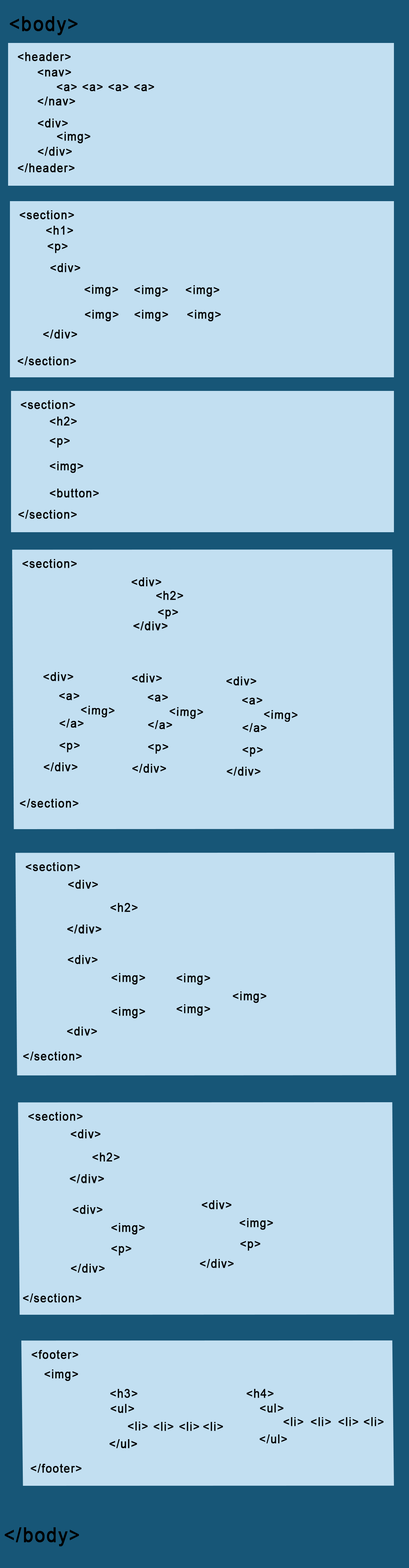
<style>
.page{position:relative;width:409px;height:1568px;background:#c2dff1}
.page>*{position:absolute;margin:0}
.t1{font:20.2px "ArialMT";letter-spacing:0.06em;color:#000000;font-weight:bold;scale:0.91 1}
.t2{font:12.1px "ArialMT";letter-spacing:0.06em;color:#000000;font-weight:bold;scale:0.9 1}
.t3{font:12.1px "ArialMT";letter-spacing:0.06em;color:#000000;font-weight:bold;scale:0.91 1}
.t4{font:12px "ArialMT";letter-spacing:0.06em;color:#000000;font-weight:bold;scale:0.91 1}
.t5{font:12.2px "ArialMT";letter-spacing:0.06em;color:#000000;font-weight:bold;scale:0.9 1}
</style>
<div class="page">
<p class="t1" style="left:10px;top:16px;width:67px;height:19px">&lt;body&gt;</p>
<p class="t2" style="left:18px;top:52px;width:53px;height:9px">&lt;header&gt;</p>
<p class="t2" style="left:37px;top:69px;width:34px;height:8px">&lt;nav&gt;</p>
<p class="t3" style="left:57px;top:84px;width:97px;height:7px">&lt;a&gt; &lt;a&gt; &lt;a&gt; &lt;a&gt;</p>
<p class="t2" style="left:37px;top:97px;width:38px;height:9px">&lt;/nav&gt;</p>
<p class="t4" style="left:38px;top:119px;width:30px;height:9px">&lt;div&gt;</p>
<p class="t4" style="left:57px;top:132px;width:33px;height:12px">&lt;img&gt;</p>
<p class="t4" style="left:38px;top:147px;width:34px;height:9px">&lt;/div&gt;</p>
<p class="t2" style="left:18px;top:163px;width:57px;height:10px">&lt;/header&gt;</p>
<p class="t2" style="left:19px;top:210px;width:55px;height:9px">&lt;section&gt;</p>
<p class="t2" style="left:46px;top:226px;width:27px;height:9px">&lt;h1&gt;</p>
<p class="t2" style="left:47px;top:243px;width:21px;height:10px">&lt;p&gt;</p>
<p class="t4" style="left:50px;top:263px;width:30px;height:9px">&lt;div&gt;</p>
<p class="t5" style="left:84px;top:285px;width:34px;height:12px">&lt;img&gt;</p>
<p class="t5" style="left:134px;top:285px;width:34px;height:12px">&lt;img&gt;</p>
<p class="t5" style="left:185px;top:285px;width:34px;height:12px">&lt;img&gt;</p>
<p class="t5" style="left:85px;top:310px;width:34px;height:12px">&lt;img&gt;</p>
<p class="t5" style="left:134px;top:310px;width:34px;height:12px">&lt;img&gt;</p>
<p class="t5" style="left:187px;top:310px;width:34px;height:12px">&lt;img&gt;</p>
<p class="t4" style="left:43px;top:330px;width:34px;height:9px">&lt;/div&gt;</p>
<p class="t3" style="left:18px;top:356px;width:58px;height:10px">&lt;/section&gt;</p>
<p class="t2" style="left:21px;top:400px;width:54px;height:9px">&lt;section&gt;</p>
<p class="t2" style="left:50px;top:417px;width:27px;height:9px">&lt;h2&gt;</p>
<p class="t2" style="left:50px;top:438px;width:20px;height:10px">&lt;p&gt;</p>
<p class="t2" style="left:50px;top:461px;width:33px;height:12px">&lt;img&gt;</p>
<p class="t2" style="left:50px;top:489px;width:49px;height:9px">&lt;button&gt;</p>
<p class="t3" style="left:18px;top:510px;width:59px;height:9px">&lt;/section&gt;</p>
<p class="t2" style="left:22px;top:559px;width:55px;height:9px">&lt;section&gt;</p>
<p class="t2" style="left:131px;top:577px;width:30px;height:10px">&lt;div&gt;</p>
<p class="t2" style="left:156px;top:591px;width:27px;height:9px">&lt;h2&gt;</p>
<p class="t2" style="left:158px;top:609px;width:20px;height:10px">&lt;p&gt;</p>
<p class="t2" style="left:43px;top:672px;width:30px;height:9px">&lt;div&gt;</p>
<p class="t2" style="left:132px;top:674px;width:30px;height:9px">&lt;div&gt;</p>
<p class="t2" style="left:226px;top:676px;width:30px;height:10px">&lt;div&gt;</p>
<p class="t2" style="left:59px;top:693px;width:20px;height:7px">&lt;a&gt;</p>
<p class="t2" style="left:148px;top:694px;width:20px;height:8px">&lt;a&gt;</p>
<p class="t2" style="left:242px;top:697px;width:20px;height:8px">&lt;a&gt;</p>
<p class="t2" style="left:81px;top:705px;width:34px;height:13px;rotate:2deg">&lt;img&gt;</p>
<p class="t2" style="left:169px;top:707px;width:34px;height:12px;rotate:2deg">&lt;img&gt;</p>
<p class="t2" style="left:264px;top:710px;width:33px;height:12px;rotate:2deg">&lt;img&gt;</p>
<p class="t2" style="left:59px;top:719px;width:25px;height:9px">&lt;/a&gt;</p>
<p class="t2" style="left:148px;top:720px;width:24px;height:9px">&lt;/a&gt;</p>
<p class="t2" style="left:242px;top:723px;width:24px;height:9px">&lt;/a&gt;</p>
<p class="t2" style="left:59px;top:743px;width:21px;height:9px">&lt;p&gt;</p>
<p class="t2" style="left:148px;top:744px;width:20px;height:10px">&lt;p&gt;</p>
<p class="t2" style="left:242px;top:747px;width:20px;height:10px">&lt;p&gt;</p>
<p class="t2" style="left:44px;top:762px;width:33px;height:10px">&lt;/div&gt;</p>
<p class="t2" style="left:132px;top:764px;width:34px;height:9px">&lt;/div&gt;</p>
<p class="t2" style="left:226px;top:767px;width:34px;height:9px">&lt;/div&gt;</p>
<p class="t3" style="left:20px;top:799px;width:59px;height:9px">&lt;/section&gt;</p>
<p class="t2" style="left:26px;top:862px;width:54px;height:9px">&lt;section&gt;</p>
<p class="t2" style="left:68px;top:880px;width:30px;height:9px">&lt;div&gt;</p>
<p class="t2" style="left:110px;top:903px;width:28px;height:9px">&lt;h2&gt;</p>
<p class="t2" style="left:68px;top:955px;width:30px;height:9px">&lt;div&gt;</p>
<p class="t3" style="left:111px;top:973px;width:34px;height:12px">&lt;img&gt;</p>
<p class="t3" style="left:176px;top:973px;width:34px;height:12px">&lt;img&gt;</p>
<p class="t3" style="left:232px;top:991px;width:34px;height:12px">&lt;img&gt;</p>
<p class="t3" style="left:111px;top:1007px;width:34px;height:12px">&lt;img&gt;</p>
<p class="t3" style="left:176px;top:1004px;width:34px;height:12px">&lt;img&gt;</p>
<p class="t3" style="left:67px;top:1027px;width:30px;height:9px">&lt;div&gt;</p>
<p class="t3" style="left:23px;top:1052px;width:59px;height:9px">&lt;/section&gt;</p>
<p class="t2" style="left:28px;top:1112px;width:55px;height:9px">&lt;section&gt;</p>
<p class="t2" style="left:70px;top:1129px;width:31px;height:10px">&lt;div&gt;</p>
<p class="t2" style="left:92px;top:1153px;width:28px;height:9px">&lt;h2&gt;</p>
<p class="t2" style="left:73px;top:1205px;width:29px;height:9px">&lt;div&gt;</p>
<p class="t2" style="left:202px;top:1200px;width:29px;height:9px">&lt;div&gt;</p>
<p class="t2" style="left:111px;top:1223px;width:34px;height:12px">&lt;img&gt;</p>
<p class="t2" style="left:239px;top:1218px;width:34px;height:12px">&lt;img&gt;</p>
<p class="t2" style="left:240px;top:1241px;width:20px;height:10px">&lt;p&gt;</p>
<p class="t2" style="left:111px;top:1246px;width:20px;height:10px">&lt;p&gt;</p>
<p class="t2" style="left:71px;top:1264px;width:34px;height:9px">&lt;/div&gt;</p>
<p class="t2" style="left:200px;top:1259px;width:33px;height:9px">&lt;/div&gt;</p>
<p class="t3" style="left:23px;top:1293px;width:58px;height:10px">&lt;/section&gt;</p>
<p class="t2" style="left:32px;top:1350px;width:46px;height:9px">&lt;footer&gt;</p>
<p class="t2" style="left:44px;top:1369px;width:34px;height:12px">&lt;img&gt;</p>
<p class="t2" style="left:110px;top:1389px;width:27px;height:9px">&lt;h3&gt;</p>
<p class="t2" style="left:246px;top:1389px;width:27px;height:9px">&lt;h4&gt;</p>
<p class="t2" style="left:110px;top:1404px;width:24px;height:9px">&lt;ul&gt;</p>
<p class="t2" style="left:259px;top:1404px;width:24px;height:9px">&lt;ul&gt;</p>
<p class="t5" style="left:128px;top:1422px;width:20px;height:9px">&lt;li&gt;</p>
<p class="t5" style="left:153px;top:1422px;width:20px;height:9px">&lt;li&gt;</p>
<p class="t5" style="left:179px;top:1422px;width:20px;height:9px">&lt;li&gt;</p>
<p class="t5" style="left:203px;top:1422px;width:20px;height:9px">&lt;li&gt;</p>
<p class="t3" style="left:283px;top:1417px;width:20px;height:9px">&lt;li&gt;</p>
<p class="t3" style="left:311px;top:1417px;width:20px;height:9px">&lt;li&gt;</p>
<p class="t3" style="left:338px;top:1417px;width:20px;height:9px">&lt;li&gt;</p>
<p class="t3" style="left:363px;top:1417px;width:20px;height:9px">&lt;li&gt;</p>
<p class="t2" style="left:259px;top:1434px;width:28px;height:10px">&lt;/ul&gt;</p>
<p class="t3" style="left:30px;top:1464px;width:51px;height:9px">&lt;/footer&gt;</p>
<p class="t1" style="left:4px;top:1527px;width:75px;height:19px">&lt;/body&gt;</p>
</div>
